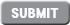
<style>
.page{position:relative;width:70px;height:25px;background:#919296}
.page>*{position:absolute;margin:0}
.t1{font:11px "HeadlineR-HM";letter-spacing:-0.02em;color:#f9fafc}
</style>
<div class="page">
<p class="t1" style="left:11px;top:8px;width:48px;height:10px">SUBMIT</p>
</div>
